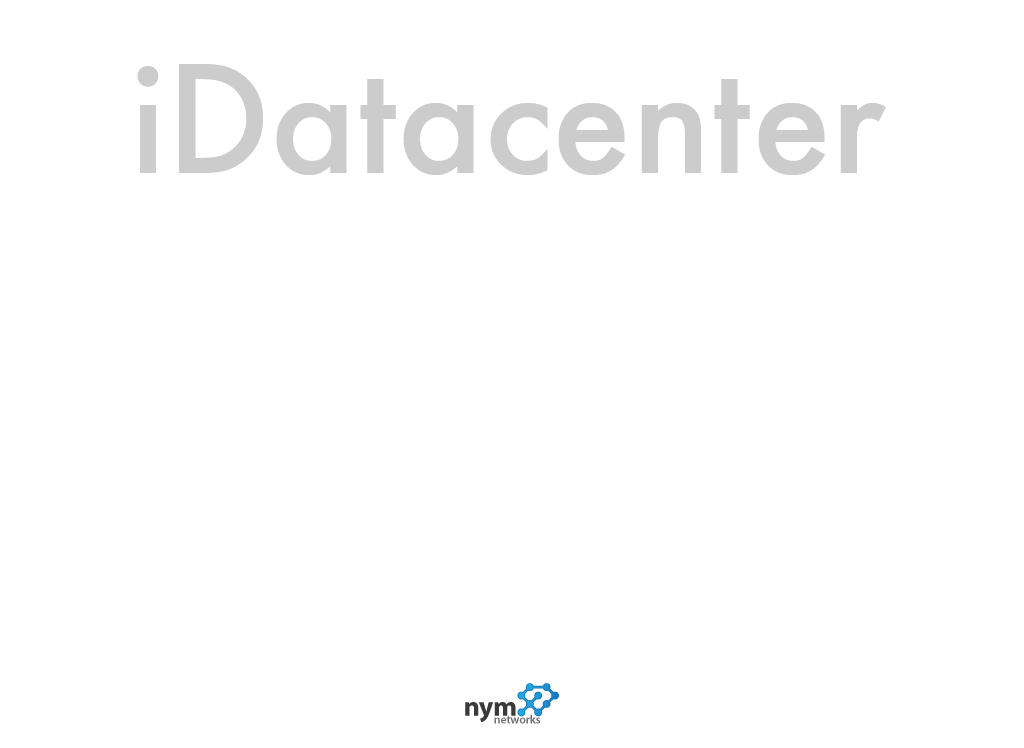
<style>
.page{position:relative;width:1024px;height:748px;background:#ffffff}
.page>*{position:absolute;margin:0}
.t1{font:144px "Futura-Medium";color:#cccccc}
</style>
<div class="page">
<p class="t1" style="left:137px;top:64px;width:749px;height:111px">iDatacenter</p>
</div>
